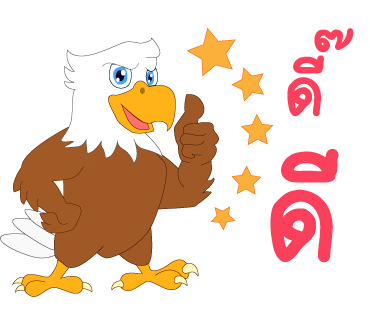
<style>
.page{position:relative;width:370px;height:320px;background:#ffffff}
.page>*{position:absolute;margin:0}
.t1{font:106px "2005_iannnnnMTV";letter-spacing:0.075em;color:#fa405a;scale:1.06 1}
.t2{font:197px "2005_iannnnnMTV";letter-spacing:0.075em;color:#fa405a;scale:1.06 1}
</style>
<div class="page">
<p class="t1" style="left:287px;top:28px;width:67px;height:89px">ดี๊</p>
<p class="t2" style="left:270px;top:149px;width:69px;height:114px">ดี</p>
</div>
